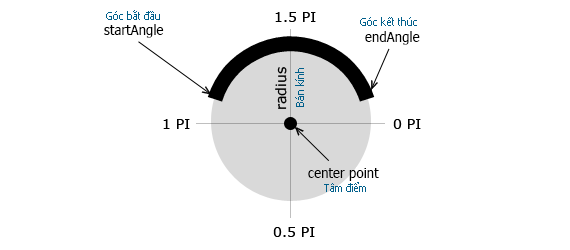
<style>
.page{position:relative;width:570px;height:250px;background:#ffffff}
.page>*{position:absolute;margin:0}
.t1{font:10.8px "Tahoma";color:#005f8b;scale:0.96 1}
.t2{font:13.9px "Tahoma";color:#000000;scale:0.96 1}
.t3{font:10.8px "Tahoma";color:#005f8b}
</style>
<div class="page">
<p class="t1" style="left:106px;top:10px;width:54px;height:10px">Góc bắt đầu</p>
<p class="t1" style="left:360px;top:17px;width:57px;height:9px">Góc kết thúc</p>
<p class="t2" style="left:104px;top:24px;width:60px;height:14px">startAngle</p>
<p class="t2" style="left:365px;top:31px;width:55px;height:14px">endAngle</p>
<p class="t3" style="left:295px;top:68px;width:9px;height:39px;rotate:-90deg">Bán kính</p>
<p class="t2" style="left:308px;top:168px;width:71px;height:13px">center point</p>
<p class="t1" style="left:324px;top:182px;width:42px;height:10px">Tâm điểm</p>
</div>
